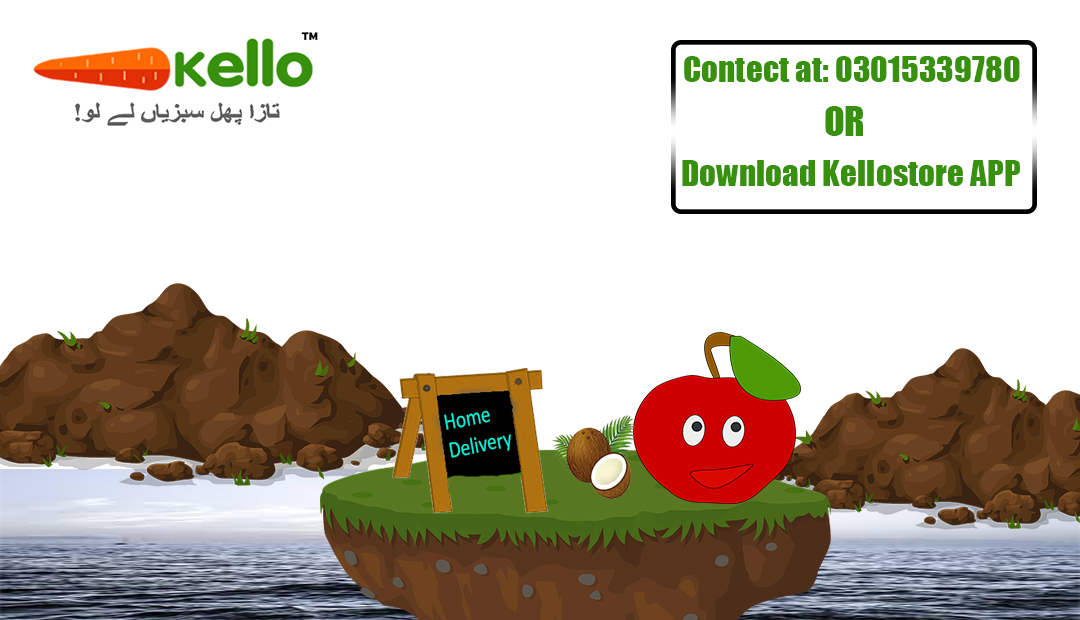
<style>
.page{position:relative;width:1080px;height:620px;background:#ffffff}
.page>*{position:absolute;margin:0}
.t1{font:33.3px "Impact";color:#37910d}
.t2{font:37.5px "Impact";color:#37910d}
.t3{font:23.6px "Calibri";color:#08f2d9;scale:0.82 1}
</style>
<div class="page">
<p class="t1" style="left:684px;top:56px;width:336px;height:26px">Contect at: 03015339780</p>
<p class="t2" style="left:825px;top:106px;width:38px;height:30px">OR</p>
<p class="t1" style="left:682px;top:160px;width:338px;height:26px">Download Kellostore APP</p>
<p class="t3" style="left:444px;top:410px;width:67px;height:48px;rotate:-12deg">Home <br>Delivery</p>
</div>
